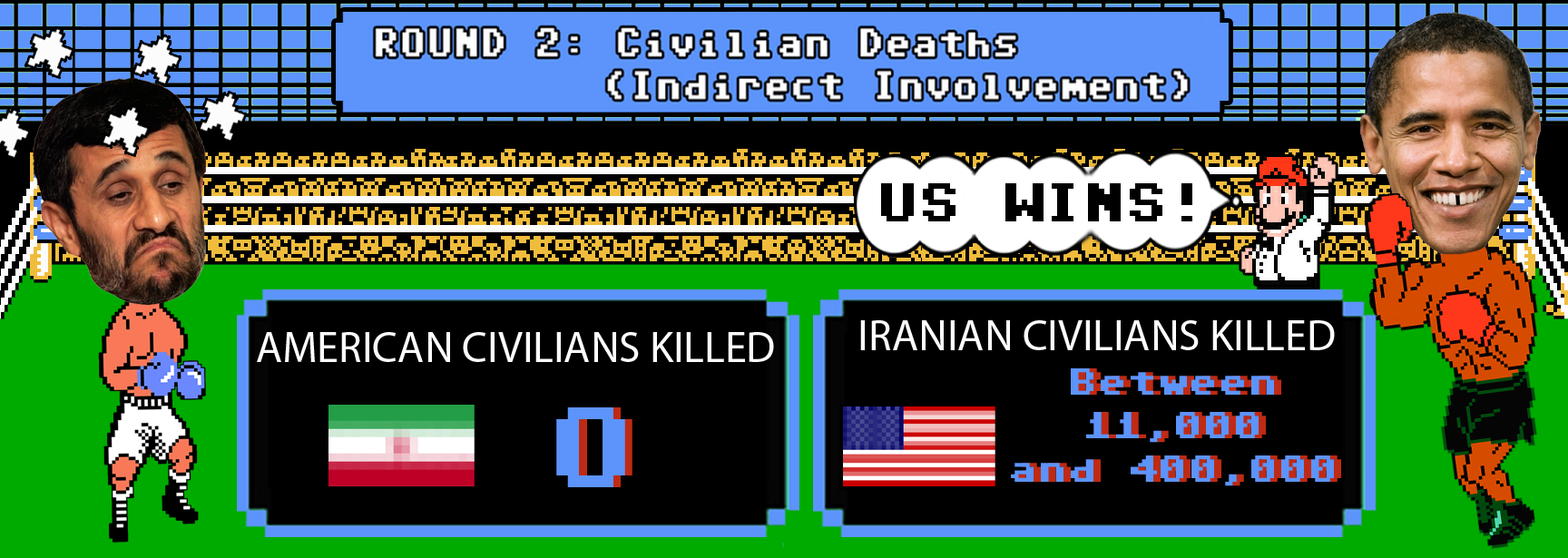
<style>
.page{position:relative;width:1568px;height:558px;background:#000000}
.page>*{position:absolute;margin:0}
.t1{font:43.6px "Adore64";letter-spacing:-0.05em;color:#000000}
.t2{font:43.6px "MyriadPro-Regular";color:#ffffff}
.t3{font:29.9px/43.6px "Adore64";color:#5c94fc}
.t4{font:90.8px "Adore64";color:#5c94fc}
</style>
<div class="page">
<p class="t1" style="left:881px;top:183px;width:311px;height:38px">US WINS!</p>
<p class="t2" style="left:860px;top:320px;width:475px;height:30px">IRANIAN CIVILIANS KILLED</p>
<p class="t2" style="left:257px;top:332px;width:517px;height:30px">AMERICAN CIVILIANS KILLED</p>
<p class="t3" style="left:1011px;top:368px;width:323px;height:118px;text-align:center">Between 11,000<br>and 400,000</p>
<p class="t4" style="left:556px;top:407px;width:69px;height:80px">0</p>
</div>
